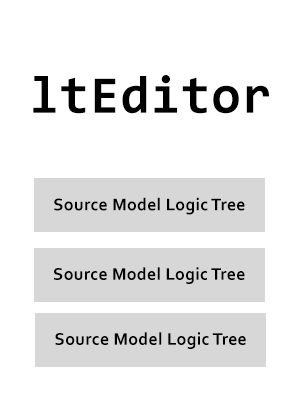
<style>
.page{position:relative;width:300px;height:400px;background:#ffffff}
.page>*{position:absolute;margin:0}
.t1{font:53.3px "Consolas-Bold";letter-spacing:0.02em;color:#000000}
.t2{font:17.6px "Corbel-Bold";letter-spacing:0.02em;color:#000000}
</style>
<div class="page">
<p class="t1" style="left:33px;top:75px;width:236px;height:39px">ltEditor</p>
<p class="t2" style="left:54px;top:197px;width:191px;height:18px">Source Model Logic Tree</p>
<p class="t2" style="left:54px;top:267px;width:191px;height:17px">Source Model Logic Tree</p>
<p class="t2" style="left:55px;top:332px;width:191px;height:17px">Source Model Logic Tree</p>
</div>
